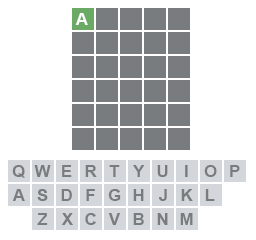
<style>
.page{position:relative;width:256px;height:240px;background:#ffffff}
.page>*{position:absolute;margin:0}
.t1{font:16.7px "Arial-BoldMT";color:#ffffff}
.t2{font:16.7px "Arial-BoldMT";color:#787c7e}
</style>
<div class="page">
<p class="t1" style="left:75px;top:13px;width:13px;height:12px">A</p>
<p class="t2" style="left:12px;top:165px;width:13px;height:13px">Q</p>
<p class="t2" style="left:34px;top:165px;width:17px;height:12px">W</p>
<p class="t2" style="left:62px;top:165px;width:10px;height:12px">E</p>
<p class="t2" style="left:85px;top:165px;width:12px;height:12px">R</p>
<p class="t2" style="left:109px;top:165px;width:11px;height:12px">T</p>
<p class="t2" style="left:133px;top:165px;width:12px;height:12px">Y</p>
<p class="t2" style="left:157px;top:165px;width:11px;height:12px">U</p>
<p class="t2" style="left:185px;top:165px;width:3px;height:12px">I</p>
<p class="t2" style="left:204px;top:165px;width:13px;height:12px">O</p>
<p class="t2" style="left:230px;top:165px;width:10px;height:12px">P</p>
<p class="t2" style="left:12px;top:189px;width:13px;height:12px">A</p>
<p class="t2" style="left:37px;top:189px;width:11px;height:12px">S</p>
<p class="t2" style="left:61px;top:189px;width:11px;height:12px">D</p>
<p class="t2" style="left:86px;top:189px;width:9px;height:12px">F</p>
<p class="t2" style="left:108px;top:189px;width:13px;height:12px">G</p>
<p class="t2" style="left:133px;top:189px;width:11px;height:12px">H</p>
<p class="t2" style="left:159px;top:189px;width:8px;height:12px">J</p>
<p class="t2" style="left:181px;top:189px;width:12px;height:12px">K</p>
<p class="t2" style="left:205px;top:189px;width:10px;height:12px">L</p>
<p class="t2" style="left:37px;top:213px;width:11px;height:12px">Z</p>
<p class="t2" style="left:61px;top:213px;width:12px;height:12px">X</p>
<p class="t2" style="left:85px;top:213px;width:11px;height:12px">C</p>
<p class="t2" style="left:108px;top:213px;width:12px;height:12px">V</p>
<p class="t2" style="left:133px;top:213px;width:11px;height:12px">B</p>
<p class="t2" style="left:157px;top:213px;width:11px;height:12px">N</p>
<p class="t2" style="left:180px;top:213px;width:13px;height:12px">M</p>
</div>
